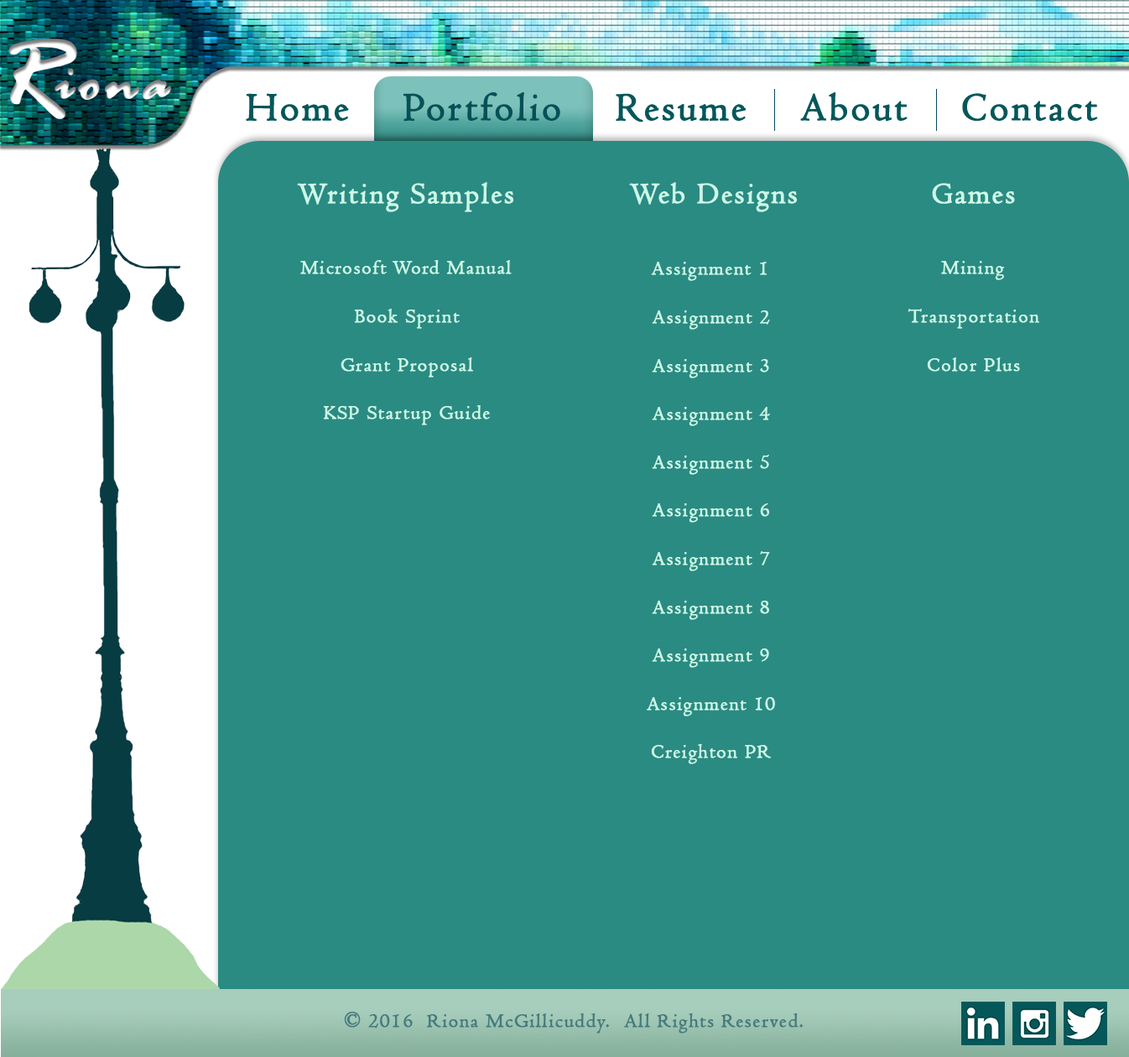
<style>
.page{position:relative;width:1129px;height:1057px;background:#2a8b83}
.page>*{position:absolute;margin:0}
.t1{font:40.2px "Centaur";letter-spacing:0.05em;color:#055759;font-weight:bold}
.t2{font:40.2px "Centaur";letter-spacing:0.05em;color:#035157;font-weight:bold}
.t3{font:30.2px "Centaur";letter-spacing:0.05em;color:#cdf9e7;font-weight:bold}
.t4{font:20.1px "Centaur";letter-spacing:0.05em;color:#cdf9e7;font-weight:bold}
.t5{font:20.1px "Centaur";letter-spacing:0.05em;color:#457a7c;font-weight:bold}
</style>
<div class="page">
<p class="t1" style="left:246px;top:92px;width:852px;height:30px">Home   <span class="t2"> Portfolio</span>    Resume    About    Contact</p>
<p class="t3" style="left:297px;top:182px;width:718px;height:30px">Writing Samples    Web Designs     Games</p>
<p class="t4" style="left:300px;top:260px;width:211px;height:165px;text-align:center">Microsoft Word Manual<br><br>Book Sprint<br><br>Grant Proposal<br><br>KSP Startup Guide</p>
<p class="t4" style="left:646px;top:262px;width:129px;height:502px;text-align:center">Assignment 1<br><br>Assignment 2<br><br>Assignment 3<br><br>Assignment 4<br><br>Assignment 5<br><br>Assignment 6<br><br>Assignment 7<br><br>Assignment 8<br><br>Assignment 9<br><br>Assignment 10<br><br>Creighton PR</p>
<p class="t4" style="left:907px;top:261px;width:132px;height:110px;text-align:center">Mining<br><br>Transportation<br><br>Color Plus</p>
<p class="t5" style="left:344px;top:1011px;width:458px;height:22px"><span class="t4"><br></span>© 2016  Riona McGillicuddy.  All Rights Reserved.</p>
</div>
